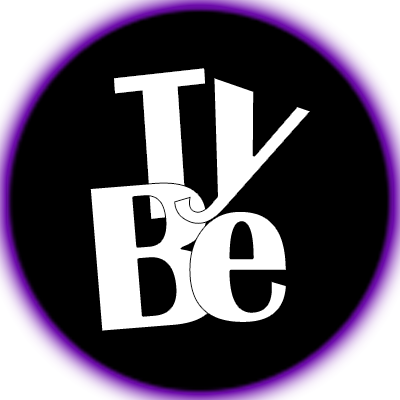
<style>
.page{position:relative;width:400px;height:400px;background:#000000}
.page>*{position:absolute;margin:0}
.t1{font:214.6px "BritannicBold";color:#ffffff;font-weight:bold;scale:0.78 1}
.t2{font:215.1px "BritannicBold";color:#ffffff;font-weight:bold}
.t3{font:214.9px "BritannicBold";color:#ffffff;font-weight:bold}
</style>
<div class="page">
<p class="t1" style="left:114px;top:68px;width:91px;height:151px;rotate:-6deg">T</p>
<p class="t2" style="left:174px;top:77px;width:137px;height:147px;rotate:19deg">y</p>
<p class="t3" style="left:89px;top:182px;width:130px;height:150px;rotate:-5deg">B</p>
<p class="t3" style="left:189px;top:211px;width:98px;height:112px">e</p>
</div>
